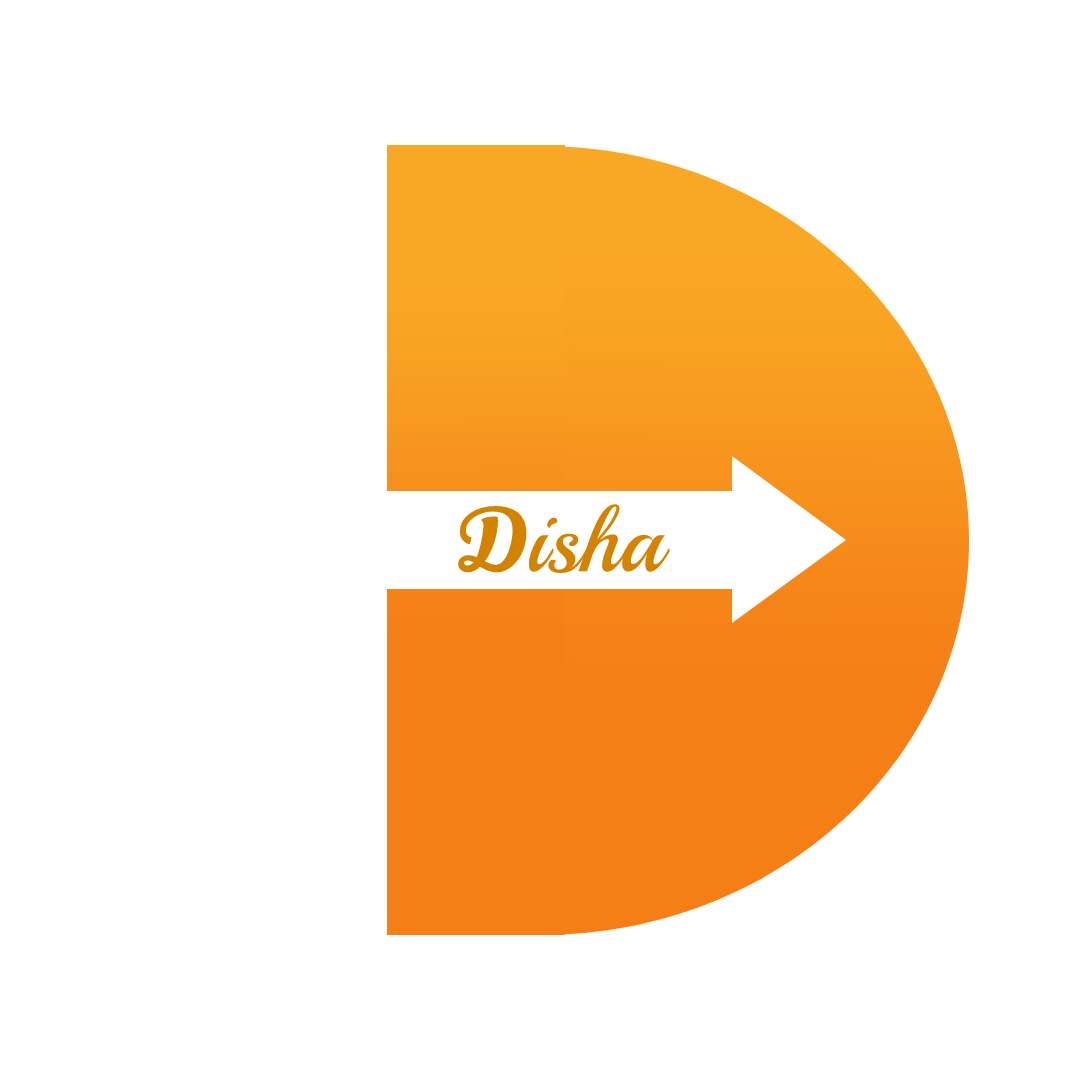
<style>
.page{position:relative;width:1080px;height:1080px;background:#ffffff}
.page>*{position:absolute;margin:0}
.t1{font:90px "Playball-Regular";color:#d48300}
.t2{font:90px "OleoScriptSwashCaps-Regular";color:#d48300}
</style>
<div class="page">
<p class="t1" style="left:458px;top:504px;width:212px;height:70px"><span class="t2">D</span>isha</p>
</div>
